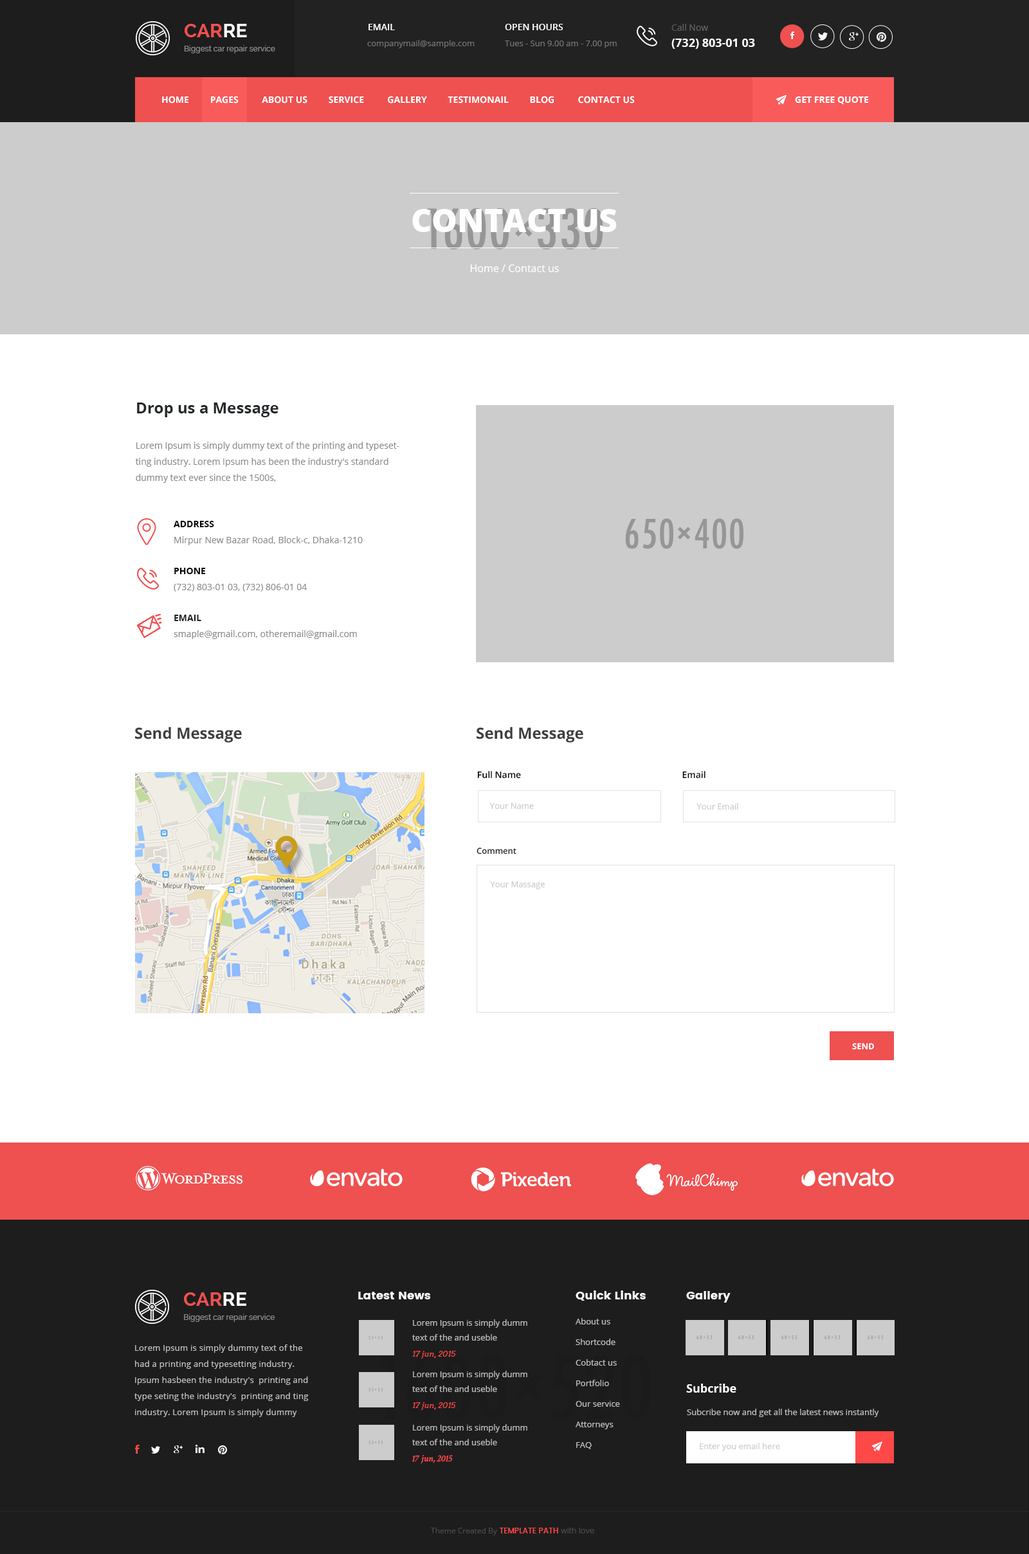
<style>
.page{position:relative;width:1029px;height:1554px;background:#ffffff}
.page>*{position:absolute;margin:0}
.t1{font:7.7px/14.1px "Raleway-Medium";color:#8a8a8a}
.t2{font:19.3px/14.1px "Raleway-Bold";color:#ef5050}
.t3{font:19.3px/14.1px "Raleway-Bold";color:#ffffff}
.t4{font:9px "OpenSans-Semibold";color:#ffffff}
.t5{font:11.6px/16.1px "OpenSans-Bold";color:#ffffff}
.t6{font:9px/16.1px "OpenSans";color:#575757}
.t7{font:9px/16.1px "OpenSans";color:#616161}
.t8{font:8.4px "OpenSans";color:#727272}
.t9{font:8.4px/14.1px "OpenSans";color:#727272}
.t10{font:8.4px/14.1px "Lato-Regular";color:#727272}
.t11{font:9px "OpenSans-Bold";color:#ffffff;text-transform:uppercase}
.t12{font:9px "OpenSans-Bold";color:#fefefe}
.t13{font:32.1px "OpenSans-Extrabold";color:#fefefe;text-transform:uppercase}
.t14{font:10.3px "OpenSans";color:#fefefe}
.t15{font:15.4px "OpenSans-Bold";color:#23282a}
.t16{font:9px/16.1px "OpenSans";color:#8b8b8b}
.t17{font:9px/16.1px "OpenSans";color:#777777}
.t18{font:9px/25.7px "OpenSans-Bold";color:#000000}
.t19{font:9px/15.4px "OpenSans-Bold";color:#000000}
.t20{font:9px/15.4px "OpenSans-Bold";color:#1f1f1f}
.t21{font:15.4px "OpenSans-Bold";color:#3f3e3e}
.t22{font:9px "OpenSans-Semibold";color:#000000}
.t23{font:8.4px "OpenSans";color:#cacac9}
.t24{font:8.4px "OpenSans-Semibold";color:#262524}
.t25{font:8.4px "OpenSans-Bold";color:#ffffff;text-transform:uppercase}
.t26{font:11.6px "Poppins";color:#ffffff}
.t27{font:8.4px/14.8px "OpenSans";color:#bebebe}
.t28{font:7.7px/16.1px "Arvo-Italic";color:#ff4848}
.t29{font:8.4px/20.6px "OpenSans";color:#bebebe}
.t30{font:8.4px/16.1px "OpenSans";letter-spacing:0.02em;color:#bebebe}
.t31{font:11.6px "OpenSans-Bold";color:#ffffff}
.t32{font:8.4px "OpenSans";color:#bebebe}
.t33{font:9.6px/16.1px "CrimsonText-SemiboldItalic";color:#ff4848}
.t34{font:8.4px "OpenSans";color:#cccccc}
.t35{font:7.7px "OpenSans";color:#474747}
.t36{font:7.7px "Poppins-Medium";color:#ff4848}
.t37{font:7.7px "Poppins-Regular";color:#474747}
</style>
<div class="page">
<p class="t1" style="left:184px;top:24px;width:91px;height:29px"><span class="t2">CAR</span><span class="t3">RE<br></span>Biggest car repair service</p>
<p class="t4" style="left:368px;top:24px;width:27px;height:6px">EMAIL</p>
<p class="t4" style="left:505px;top:24px;width:58px;height:6px">OPEN HOURS</p>
<p class="t5" style="left:671px;top:24px;width:84px;height:25px"><span class="t6">C</span><span class="t7">all Now<br></span>(732) 803-01 03</p>
<p class="t8" style="left:367px;top:40px;width:107px;height:8px">companymail@sample.com</p>
<p class="t9" style="left:505px;top:40px;width:111px;height:8px">Tues - Sun 9.00 am - 7.00 pm<br><span class="t10">Saturday &amp; Monday Closed</span></p>
<p class="t11" style="left:162px;top:96px;width:472px;height:8px">HOME         PAGES          ABOUT US         SERVICE          Gallery         TESTIMONAIL         BLOG          CONTACT US</p>
<p class="t12" style="left:795px;top:96px;width:74px;height:8px">GET FREE QUOTE</p>
<p class="t13" style="left:412px;top:209px;width:204px;height:23px">Contact Us</p>
<p class="t14" style="left:470px;top:264px;width:89px;height:9px">Home / Contact us</p>
<p class="t15" style="left:137px;top:402px;width:141px;height:15px">Drop us a Message</p>
<p class="t16" style="left:135px;top:442px;width:264px;height:41px">Lorem Ipsum is simply dummy text of the printing and typesetting industry. Lorem Ipsum has been the industry's standard dummy text ever since the 1500s,<br><span class="t17"> when an unknown printer</span></p>
<p class="t16" style="left:174px;top:521px;width:189px;height:118px"><span class="t18">ADDRESS<br></span>Mirpur New Bazar Road, Block-c, Dhaka-1210<br><br><span class="t19">PHONE<br></span>(732) 803-01 03, (732) 806-01 04<br><br><span class="t20">EMAIL<br></span>smaple@gmail.com, otheremail@gmail.com</p>
<p class="t21" style="left:135px;top:726px;width:107px;height:16px">Send Message</p>
<p class="t21" style="left:476px;top:726px;width:107px;height:16px">Send Message</p>
<p class="t22" style="left:477px;top:771px;width:44px;height:8px">Full Name</p>
<p class="t22" style="left:682px;top:771px;width:23px;height:8px">Email</p>
<p class="t23" style="left:489px;top:802px;width:45px;height:7px">Your Name</p>
<p class="t23" style="left:696px;top:802px;width:42px;height:8px">Your Email</p>
<p class="t24" style="left:476px;top:847px;width:40px;height:7px">Comment</p>
<p class="t23" style="left:490px;top:881px;width:54px;height:9px">Your Massage</p>
<p class="t25" style="left:852px;top:1043px;width:22px;height:7px">Send</p>
<p class="t1" style="left:184px;top:1292px;width:91px;height:30px"><span class="t2">CAR</span><span class="t3">RE<br></span>Biggest car repair service</p>
<p class="t26" style="left:358px;top:1292px;width:72px;height:7px">Latest News</p>
<p class="t26" style="left:575px;top:1290px;width:70px;height:10px">Quick Links</p>
<p class="t26" style="left:686px;top:1291px;width:44px;height:11px">Gallery</p>
<p class="t27" style="left:412px;top:1319px;width:115px;height:39px">Lorem Ipsum is simply dumm<br>text of the and useble<br><span class="t28">17 jun, 2015</span></p>
<p class="t29" style="left:575px;top:1318px;width:45px;height:131px">About us<br>Shortcode<br>Cobtact us<br>Portfolio<br>Our service<br>Attorneys<br>FAQ</p>
<p class="t30" style="left:134px;top:1344px;width:175px;height:73px">Lorem Ipsum is simply dummy text of the had a printing and typesetting industry. <br>Ipsum hasbeen the industry's  printing and type seting the industry's  printing and ting industry. Lorem Ipsum is simply dummy</p>
<p class="t27" style="left:412px;top:1371px;width:115px;height:39px">Lorem Ipsum is simply dumm<br>text of the and useble<br><span class="t28">17 jun, 2015</span></p>
<p class="t31" style="left:686px;top:1383px;width:50px;height:9px">Subcribe</p>
<p class="t32" style="left:687px;top:1408px;width:192px;height:9px">Subcribe now and get all the latest news instantly</p>
<p class="t27" style="left:411px;top:1424px;width:116px;height:40px">Lorem Ipsum is simply dumm<br>text of the and useble<br><span class="t33">17 jun, 2015</span></p>
<p class="t34" style="left:699px;top:1443px;width:81px;height:8px">Enter you email here</p>
<p class="t35" style="left:431px;top:1527px;width:163px;height:8px">Theme Created By <span class="t36">TEMPLATE PATH </span><span class="t37">with love</span></p>
</div>
